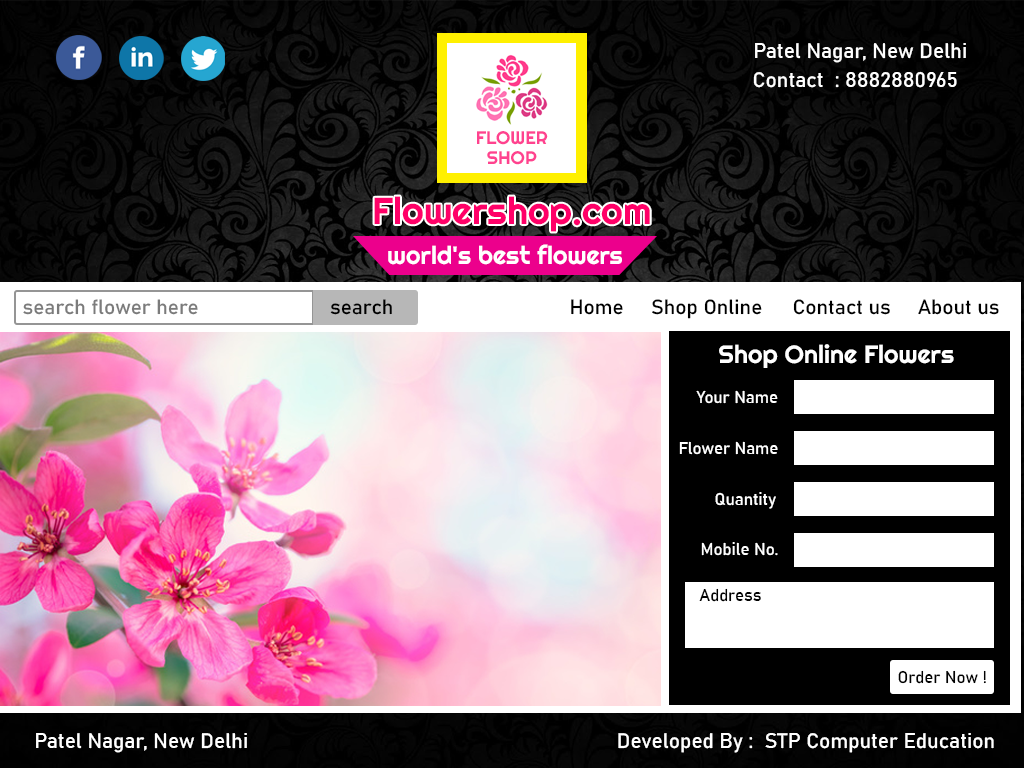
<style>
.page{position:relative;width:1024px;height:768px}
.page>*{position:absolute;margin:0}
.t1{font:20.8px "Bahnschrift";color:#ffffff}
.t2{font:37.5px "Righteous-Regular";color:#ff0068}
.t3{font:25px "Righteous-Regular";color:#ffffff}
.t4{font:20.3px "Bahnschrift";color:#7b7b7b}
.t5{font:20.3px "Bahnschrift";color:#000000}
.t6{font:16.7px "Bahnschrift";color:#ffffff}
.t7{font:16.7px "Bahnschrift";color:#010101}
</style>
<div class="page">
<p class="t1" style="left:755px;top:43px;width:211px;height:20px">Patel Nagar, New Delhi</p>
<p class="t1" style="left:753px;top:71px;width:204px;height:17px">Contact  : 8882880965</p>
<p class="t2" style="left:374px;top:196px;width:276px;height:36px">Flowershop.com</p>
<p class="t3" style="left:388px;top:244px;width:234px;height:21px">world's best flowers</p>
<p class="t4" style="left:23px;top:299px;width:175px;height:16px">search flower here</p>
<p class="t5" style="left:330px;top:299px;width:62px;height:16px">search</p>
<p class="t5" style="left:571px;top:299px;width:52px;height:16px">Home</p>
<p class="t5" style="left:652px;top:299px;width:110px;height:20px">Shop Online</p>
<p class="t5" style="left:793px;top:299px;width:97px;height:16px">Contact us</p>
<p class="t5" style="left:918px;top:299px;width:81px;height:16px">About us</p>
<p class="t3" style="left:719px;top:344px;width:235px;height:24px">Shop Online Flowers</p>
<p class="t6" style="left:696px;top:390px;width:82px;height:14px">Your Name</p>
<p class="t6" style="left:679px;top:441px;width:99px;height:14px">Flower Name</p>
<p class="t6" style="left:715px;top:492px;width:61px;height:17px">Quantity</p>
<p class="t6" style="left:701px;top:542px;width:77px;height:14px">Mobile No.</p>
<p class="t7" style="left:699px;top:588px;width:62px;height:14px">Address</p>
<p class="t7" style="left:898px;top:670px;width:88px;height:14px">Order Now !</p>
<p class="t1" style="left:36px;top:733px;width:211px;height:20px">Patel Nagar, New Delhi</p>
<p class="t1" style="left:618px;top:733px;width:376px;height:20px">Developed By :  STP Computer Education</p>
</div>
